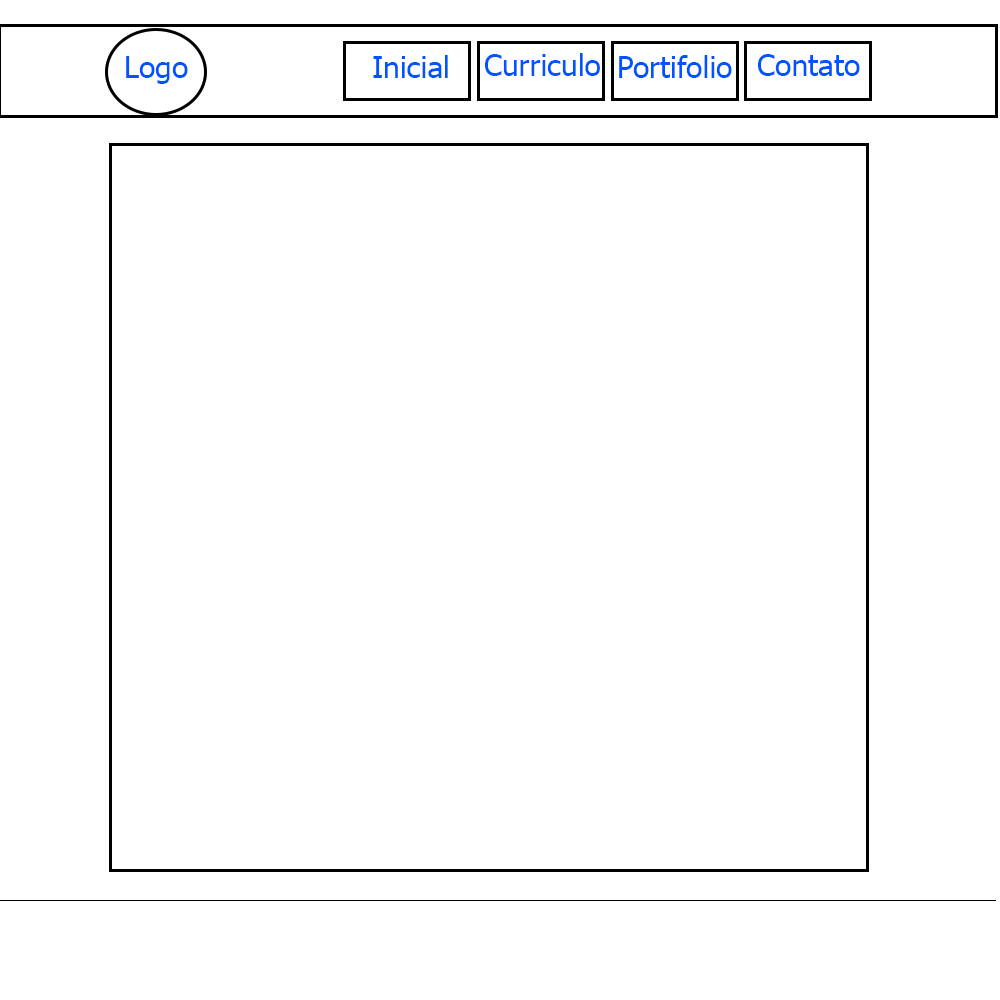
<style>
.page{position:relative;width:1000px;height:1000px;background:#ffffff}
.page>*{position:absolute;margin:0}
.t1{font:30px "Tahoma";color:#0054ff}
</style>
<div class="page">
<p class="t1" style="left:485px;top:53px;width:115px;height:23px">Curriculo</p>
<p class="t1" style="left:758px;top:54px;width:102px;height:22px">Contato</p>
<p class="t1" style="left:373px;top:55px;width:75px;height:23px">Inicial</p>
<p class="t1" style="left:619px;top:55px;width:113px;height:23px">Portifolio</p>
</div>
